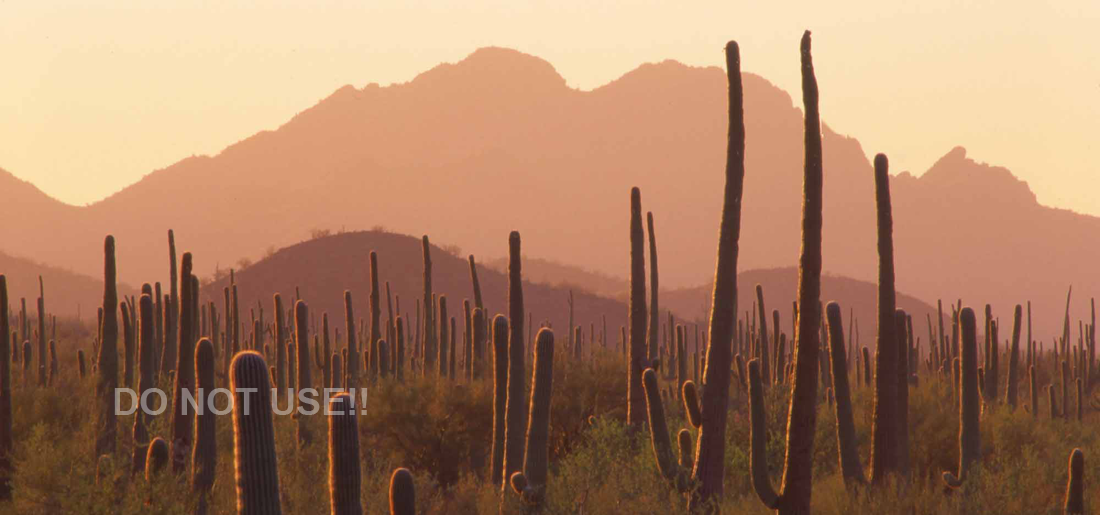
<style>
.page{position:relative;width:1100px;height:515px}
.page>*{position:absolute;margin:0}
.t1{font:37.5px "Arial-BoldMT";color:#948177}
</style>
<div class="page">
<p class="t1" style="left:114px;top:388px;width:254px;height:27px">DO NOT USE!!</p>
</div>
